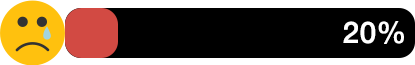
<style>
.page{position:relative;width:415px;height:65px;background:#000000}
.page>*{position:absolute;margin:0}
.t1{font:30px "HelveticaNeueCyr-Medium";color:#ffffff}
</style>
<div class="page">
<p class="t1" style="left:343px;top:21px;width:61px;height:23px">20%</p>
</div>
